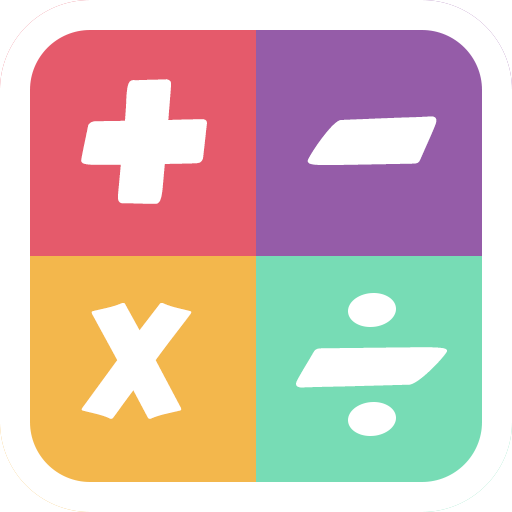
<style>
.page{position:relative;width:512px;height:512px;background:#ffffff}
.page>*{position:absolute;margin:0}
.t1{font:300px "CarterOne";color:#ffffff}
.t2{font:200px "CarterOne";color:#ffffff}
.t3{font:248.9px "CarterOne";color:#ffffff;scale:1.43 1}
</style>
<div class="page">
<p class="t1" style="left:81px;top:79px;width:126px;height:125px">+</p>
<p class="t1" style="left:307px;top:116px;width:130px;height:49px">-</p>
<p class="t2" style="left:81px;top:303px;width:111px;height:116px">x</p>
<p class="t3" style="left:296px;top:347px;width:151px;height:41px;rotate:-180deg">-</p>
</div>
